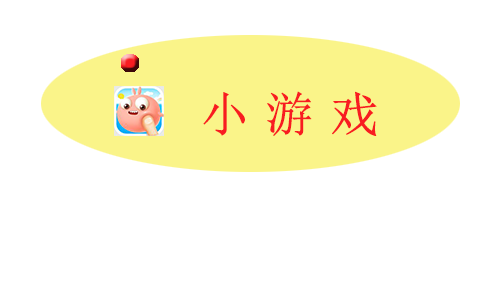
<style>
.page{position:relative;width:499px;height:300px;background:#ffffff}
.page>*{position:absolute;margin:0}
.t1{font:48px "SimSun";letter-spacing:-0.1em;color:#f81c21;font-weight:bold}
</style>
<div class="page">
<p class="t1" style="left:203px;top:91px;width:174px;height:45px">小 游 戏</p>
</div>
